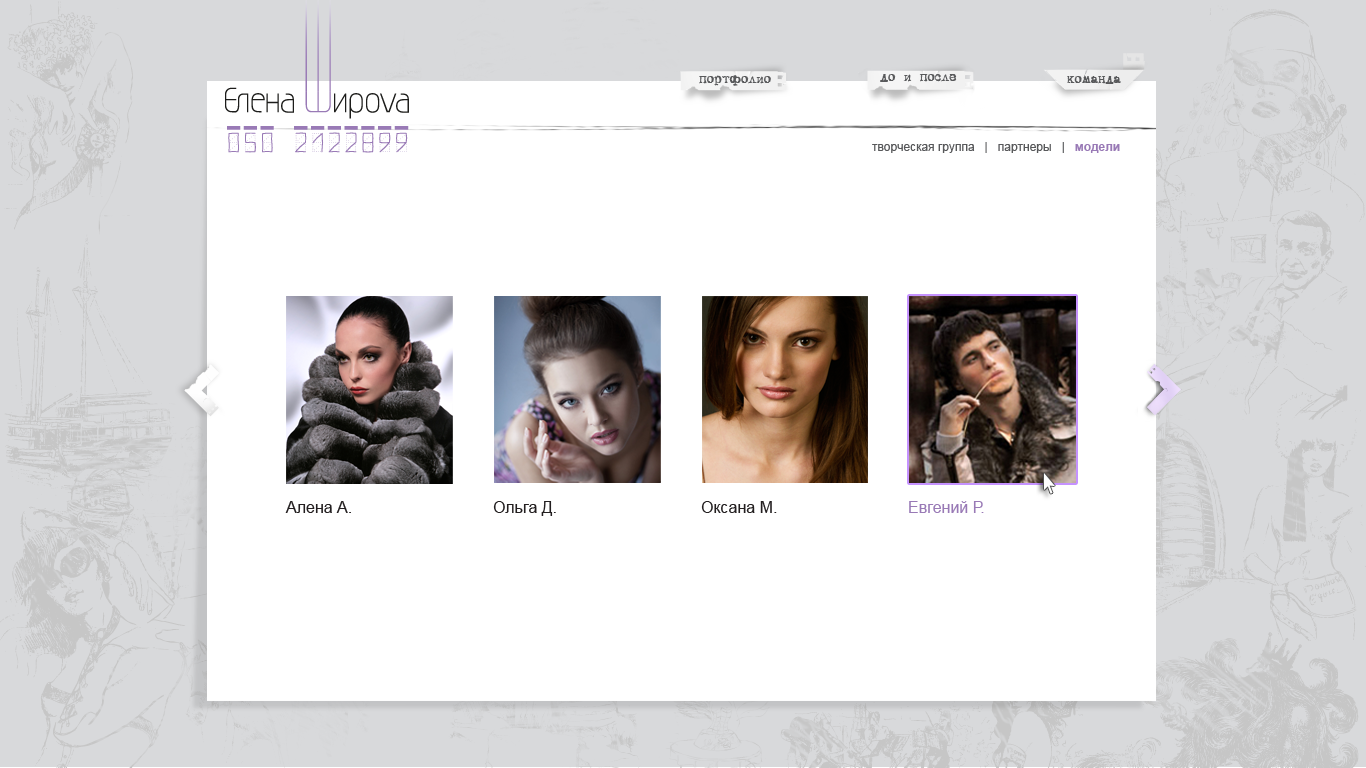
<style>
.page{position:relative;width:1366px;height:768px;background:#ffffff}
.page>*{position:absolute;margin:0}
.t1{font:14px "DSVTCoronaCyr";color:#58595b}
.t2{font:12px "ArialMT";color:#58595b}
.t3{font:12px "Arial-BoldMT";color:#997ab6}
.t4{font:16px "ArialMT";color:#231f20}
.t5{font:16px "ArialMT";color:#997ab6}
</style>
<div class="page">
<p class="t1" style="left:699px;top:75px;width:72px;height:11px">портфолио</p>
<p class="t1" style="left:880px;top:74px;width:77px;height:8px">до и после</p>
<p class="t1" style="left:1067px;top:76px;width:54px;height:8px">команда</p>
<p class="t2" style="left:872px;top:142px;width:248px;height:11px">творческая группа   |   партнеры   |   <span class="t3">модели</span></p>
<p class="t4" style="left:285px;top:501px;width:66px;height:12px">Алена А.</p>
<p class="t4" style="left:493px;top:501px;width:63px;height:15px">Ольга Д.</p>
<p class="t4" style="left:701px;top:501px;width:76px;height:12px">Оксана М.</p>
<p class="t5" style="left:909px;top:501px;width:75px;height:12px">Евгений Р.</p>
</div>
